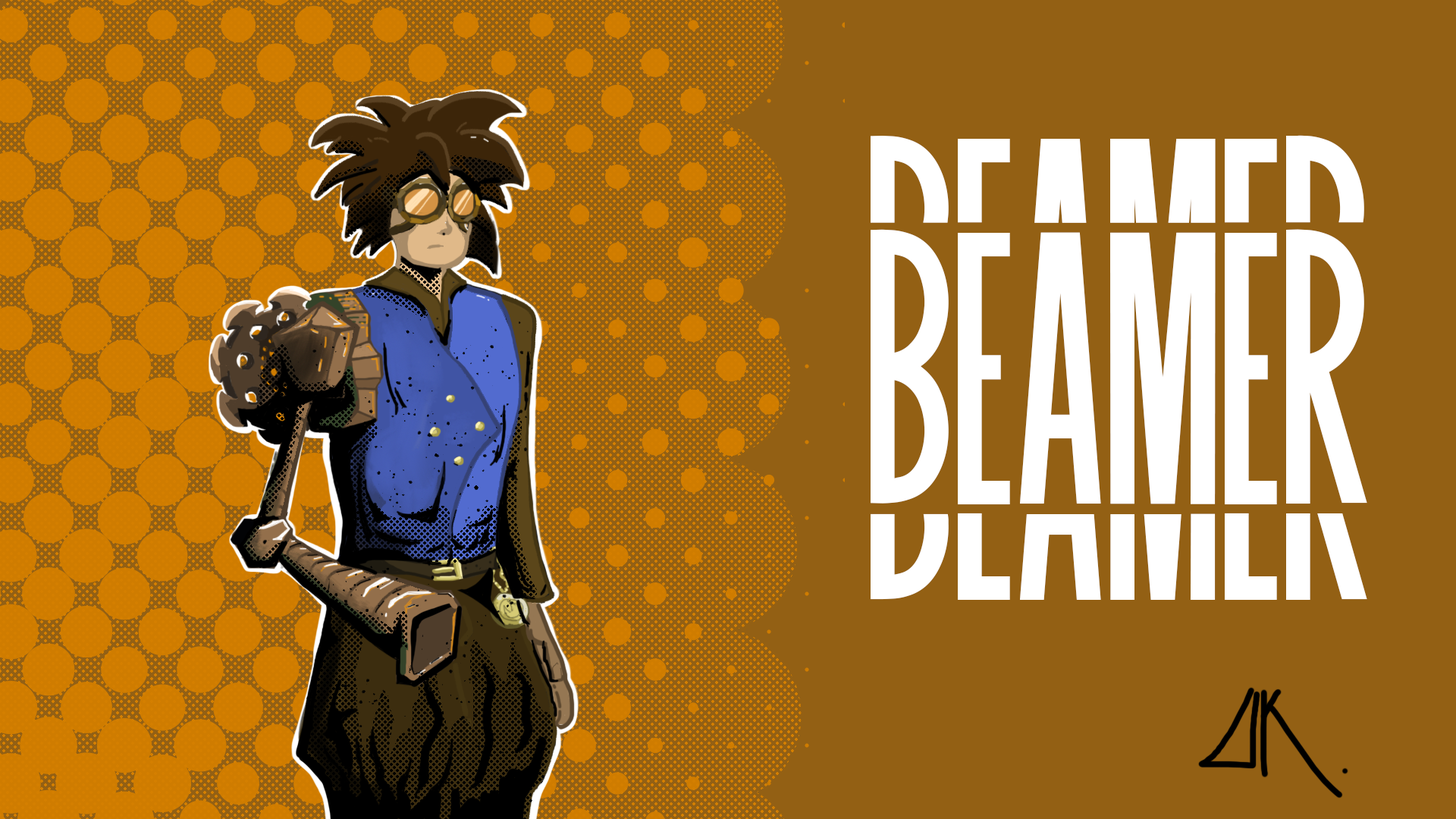
<style>
.page{position:relative;width:1456px;height:819px;background:#936014}
.page>*{position:absolute;margin:0}
.t1{font:322.8px "BLASTIMOSANS";color:#ffffff}
</style>
<div class="page">
<p class="t1" style="left:871px;top:135px;width:496px;height:465px">BEAMER</p>
</div>
